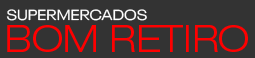
<style>
.page{position:relative;width:255px;height:58px;background:#333333}
.page>*{position:absolute;margin:0}
.t1{font:14.5px "NeuePlak-ExtendedRegular";color:#ffffff;text-transform:uppercase}
.t2{font:36.3px "HelveticaNeueLTPro-LtEx";color:#ff0000;text-transform:uppercase}
</style>
<div class="page">
<p class="t1" style="left:6px;top:9px;width:141px;height:12px">supermercados</p>
<p class="t2" style="left:7px;top:25px;width:241px;height:27px">bom retiro</p>
</div>
